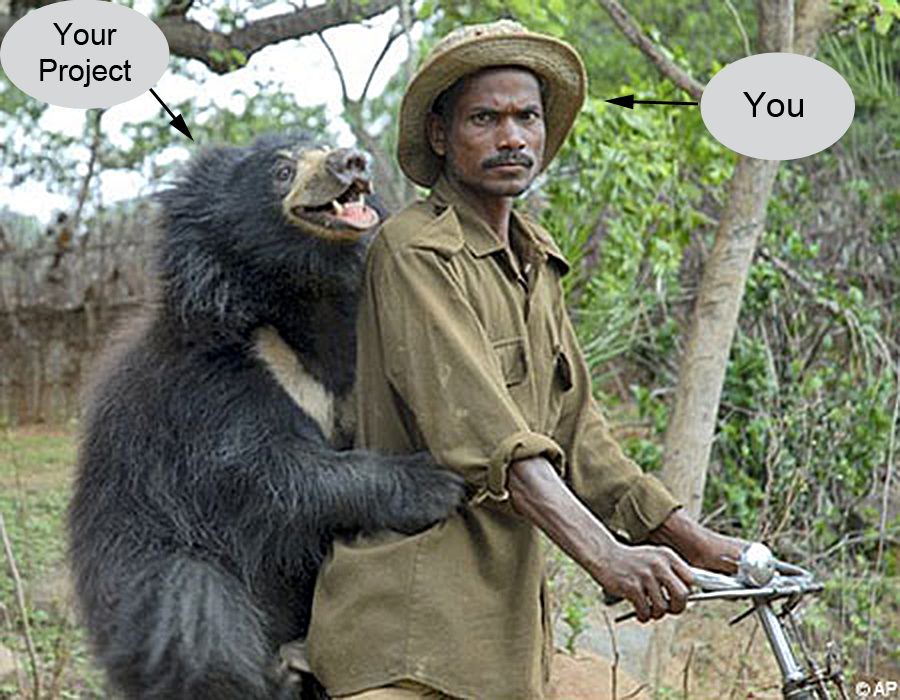
<style>
.page{position:relative;width:900px;height:700px}
.page>*{position:absolute;margin:0}
.t1{font:30px "ArialMT";color:#000000}
.t2{font:35px "ArialMT";color:#000000}
</style>
<div class="page">
<p class="t1" style="left:40px;top:23px;width:91px;height:64px;text-align:center">Your <br>Project</p>
<p class="t2" style="left:743px;top:92px;width:60px;height:25px">You</p>
</div>
